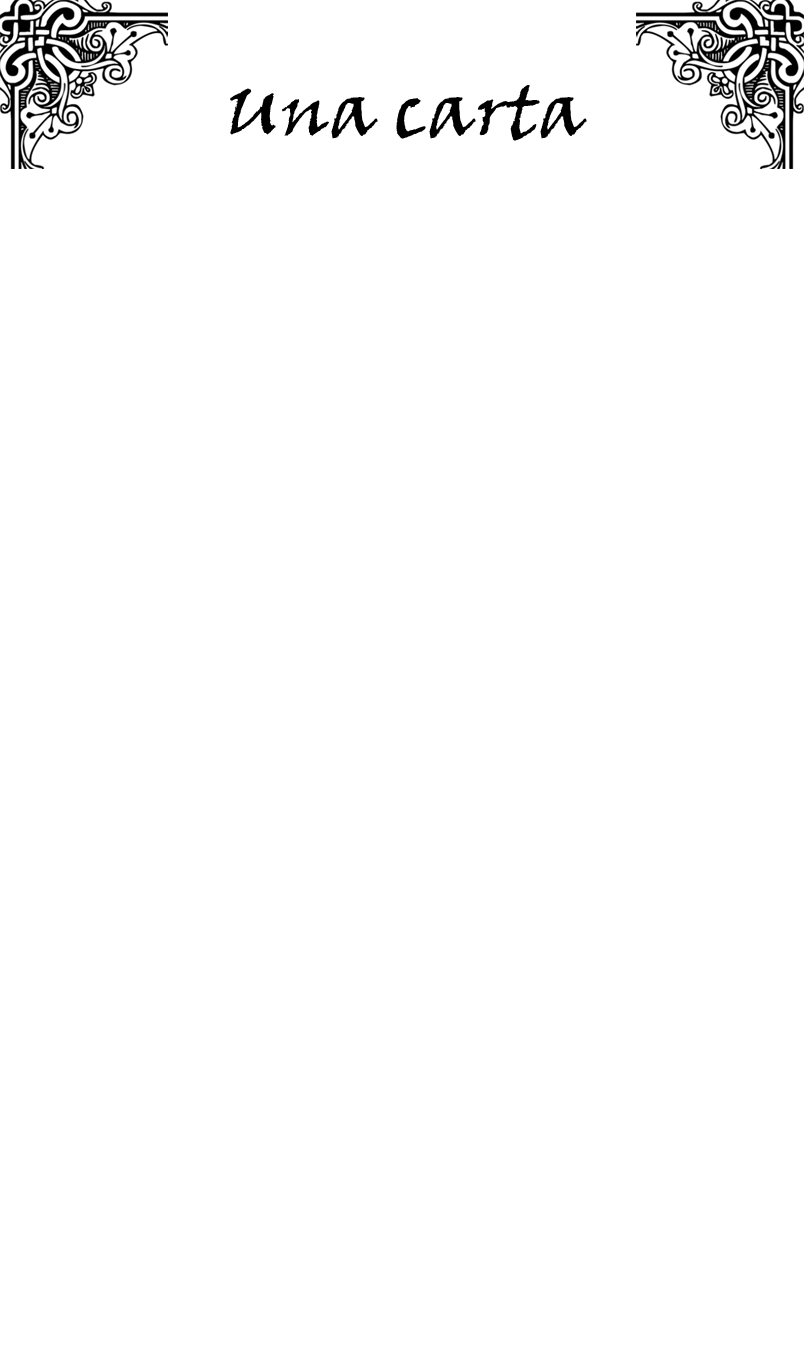
<style>
.page{position:relative;width:804px;height:1350px;background:#ffffff}
.page>*{position:absolute;margin:0}
.t1{font:75px "VinerHandITC";color:#000000}
</style>
<div class="page">
<p class="t1" style="left:230px;top:85px;width:357px;height:56px">Una carta</p>
</div>
